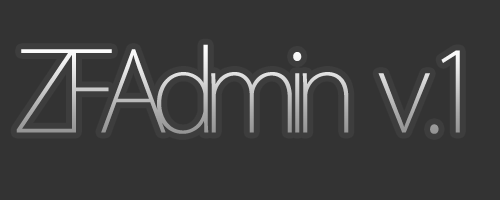
<style>
.page{position:relative;width:500px;height:200px;background:#333333}
.page>*{position:absolute;margin:0}
.t1{font:110px "KozGoPro-ExtraLight";letter-spacing:-0.15em}
</style>
<div class="page">
<p class="t1" style="left:16px;top:44px;width:444px;height:90px">ZFAdmin    v .1</p>
</div>
